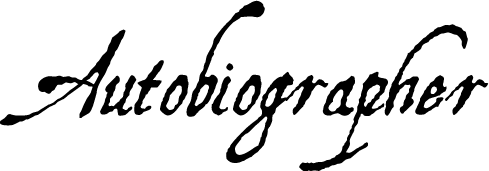
<style>
.page{position:relative;width:489px;height:171px;background:#ffffff}
.page>*{position:absolute;margin:0}
.t1{font:100px "AquilineTwo";color:#000000}
</style>
<div class="page">
<p class="t1" style="left:0px;top:0px;width:489px;height:171px">Autobiographer</p>
</div>
